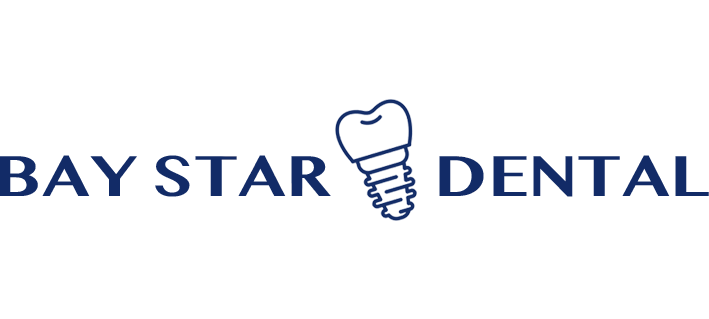
<style>
.page{position:relative;width:709px;height:319px;background:#ffffff}
.page>*{position:absolute;margin:0}
.t1{font:60px "MyanmarMN-Bold";color:#122b67;scale:1.11 1}
</style>
<div class="page">
<p class="t1" style="left:0px;top:155px;width:331px;height:42px">BAY STAR</p>
<p class="t1" style="left:439px;top:155px;width:270px;height:42px">DENTAL</p>
</div>
